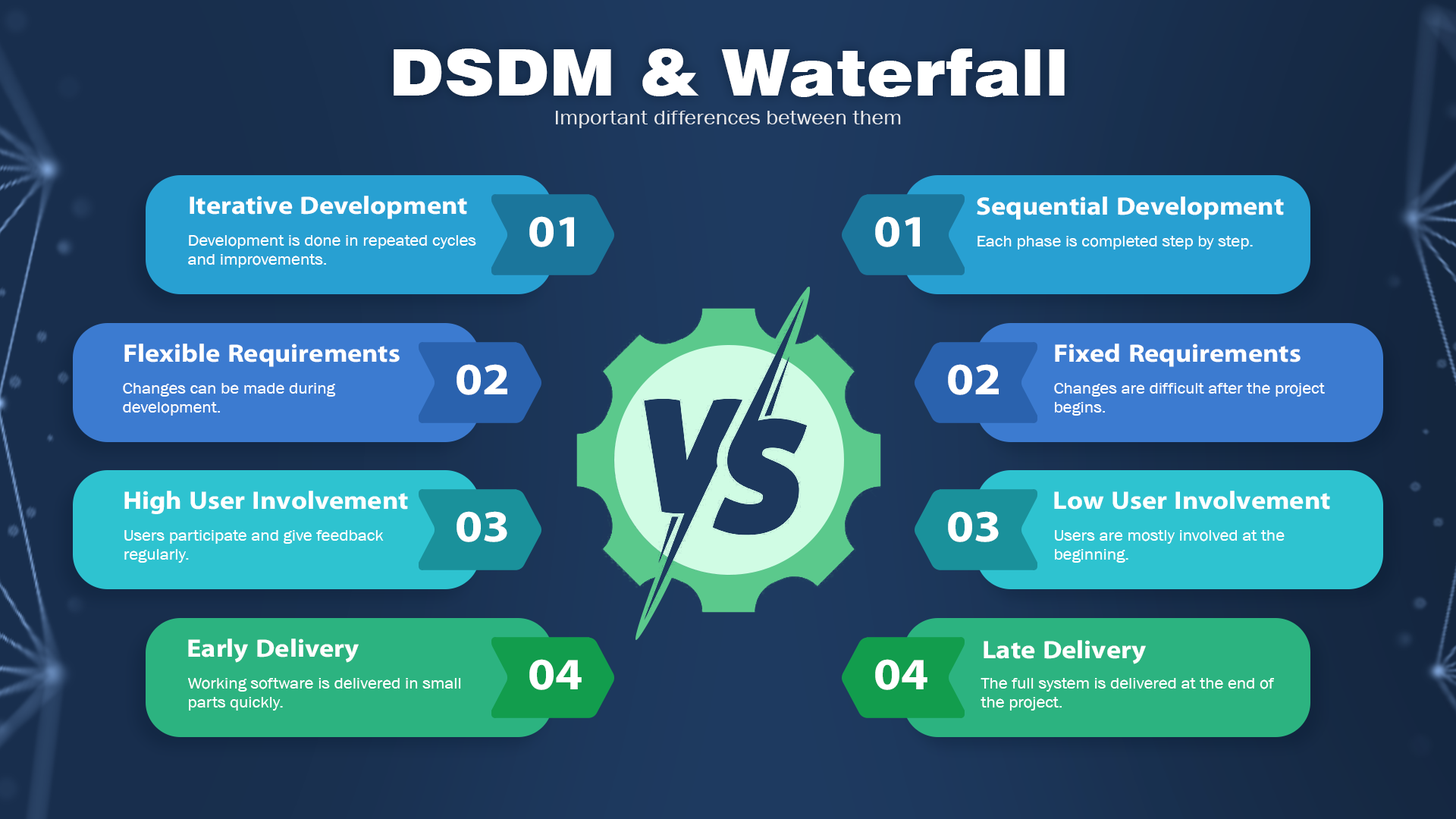
<style>
.page{position:relative;width:1456px;height:819px}
.page>*{position:absolute;margin:0}
.t1{font:63.9px "Swiss721BT-Black";color:#ffffff;scale:1.1 1}
.t2{font:20.5px "AA-Khmer-AngDaunPov";color:#ffffff;scale:1.1 1}
.t3{font:25.1px "iKampuchea001_O'Chrov";color:#ffffff;scale:1.1 1}
.t4{font:45px "iKampuchea001_O'Chrov";color:#ffffff;scale:1.1 1}
.t5{font:15.7px "AA-Khmer-AngDaunPov";color:#ffffff;scale:1.1 1}
</style>
<div class="page">
<p class="t1" style="left:394px;top:49px;width:671px;height:48px">DSDM &amp; Waterfall</p>
<p class="t2" style="left:556px;top:111px;width:345px;height:17px;opacity:0.86">Important differences between them</p>
<p class="t3" style="left:190px;top:196px;width:277px;height:23px">Iterative Development</p>
<p class="t3" style="left:977px;top:196px;width:307px;height:24px">Sequential Development</p>
<p class="t4" style="left:529px;top:216px;width:45px;height:31px">01</p>
<p class="t4" style="left:875px;top:216px;width:45px;height:31px">01</p>
<p class="t5" style="left:188px;top:235px;width:288px;height:33px">Development is done in repeated cycles <br>and improvements.</p>
<p class="t5" style="left:977px;top:236px;width:276px;height:13px">Each phase is completed step by step.</p>
<p class="t3" style="left:124px;top:344px;width:276px;height:23px">Flexible Requirements</p>
<p class="t3" style="left:1055px;top:344px;width:246px;height:23px">Fixed Requirements</p>
<p class="t4" style="left:457px;top:364px;width:50px;height:31px">02</p>
<p class="t4" style="left:948px;top:364px;width:51px;height:31px">02</p>
<p class="t5" style="left:123px;top:383px;width:213px;height:33px">Changes can be made during <br>development.</p>
<p class="t5" style="left:1054px;top:383px;width:271px;height:33px">Changes are difficult after the project <br>begins.</p>
<p class="t3" style="left:124px;top:491px;width:284px;height:23px">High User Involvement</p>
<p class="t3" style="left:1054px;top:491px;width:276px;height:19px">Low User Involvement</p>
<p class="t4" style="left:457px;top:511px;width:50px;height:31px">03</p>
<p class="t4" style="left:948px;top:511px;width:51px;height:31px">03</p>
<p class="t5" style="left:124px;top:530px;width:260px;height:33px">Users participate and give feedback <br>regularly.</p>
<p class="t5" style="left:1055px;top:530px;width:230px;height:33px">Users are mostly involved at the <br>beginning.</p>
<p class="t3" style="left:188px;top:639px;width:171px;height:24px">Early Delivery</p>
<p class="t3" style="left:984px;top:640px;width:162px;height:24px">Late Delivery</p>
<p class="t4" style="left:529px;top:659px;width:53px;height:31px">04</p>
<p class="t4" style="left:875px;top:659px;width:52px;height:31px">04</p>
<p class="t5" style="left:188px;top:678px;width:273px;height:33px">Working software is delivered in small <br>parts quickly.</p>
<p class="t5" style="left:981px;top:678px;width:293px;height:33px">The full system is delivered at the end of <br>the project.</p>
</div>
